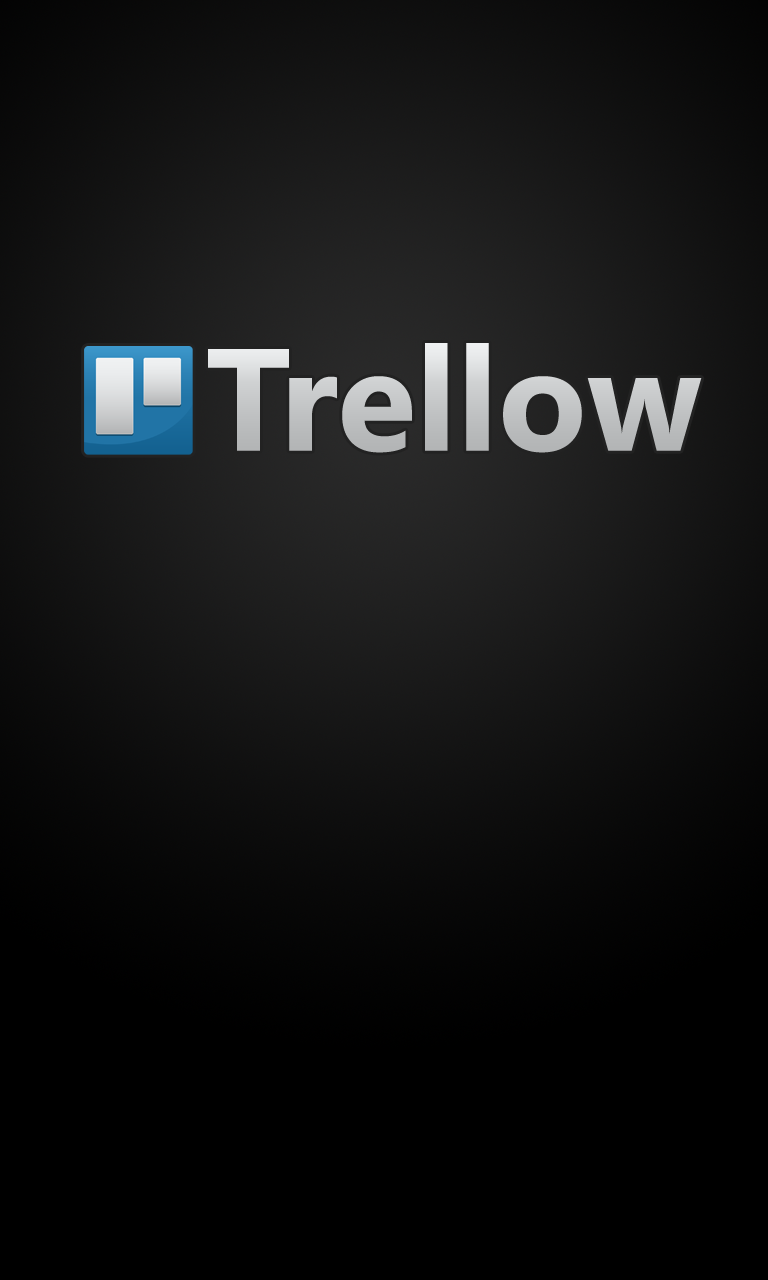
<style>
.page{position:relative;width:768px;height:1280px;background:#000000}
.page>*{position:absolute;margin:0}
.t1{font:145px "SegoeWP-Bold";color:#c3c5c6}
</style>
<div class="page">
<p class="t1" style="left:208px;top:343px;width:494px;height:110px">Trellow</p>
</div>
